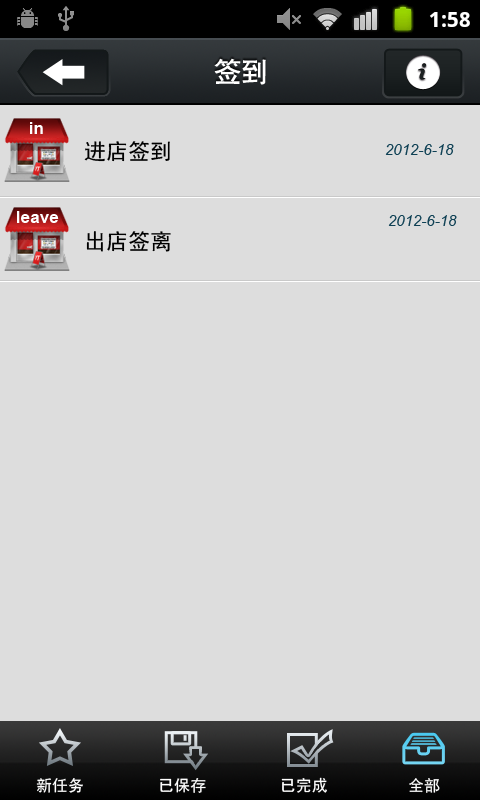
<style>
.page{position:relative;width:480px;height:800px;background:#dddddd}
.page>*{position:absolute;margin:0}
.t1{font:27px "CTCuHeiSJ";color:#ffffff}
.t2{font:17.3px "Arial-BoldMT";color:#fefefe}
.t3{font:22px "SimHei";color:#000000}
.t4{font:15px "Arial-ItalicMT";color:#0e4054}
.t5{font:16px "SimHei";color:#ffffff}
</style>
<div class="page">
<p class="t1" style="left:214px;top:58px;width:52px;height:27px">签到</p>
<p class="t2" style="left:30px;top:122px;width:13px;height:12px">in</p>
<p class="t3" style="left:84px;top:141px;width:86px;height:21px">进店签到</p>
<p class="t4" style="left:385px;top:144px;width:69px;height:11px">2012-6-18</p>
<p class="t2" style="left:17px;top:211px;width:42px;height:12px">leave</p>
<p class="t4" style="left:388px;top:215px;width:69px;height:11px">2012-6-18</p>
<p class="t3" style="left:86px;top:231px;width:85px;height:21px">出店签离</p>
<p class="t5" style="left:36px;top:778px;width:47px;height:15px">新任务</p>
<p class="t5" style="left:160px;top:778px;width:46px;height:15px">已保存</p>
<p class="t5" style="left:281px;top:777px;width:46px;height:16px">已完成</p>
<p class="t5" style="left:409px;top:778px;width:31px;height:15px">全部</p>
</div>
